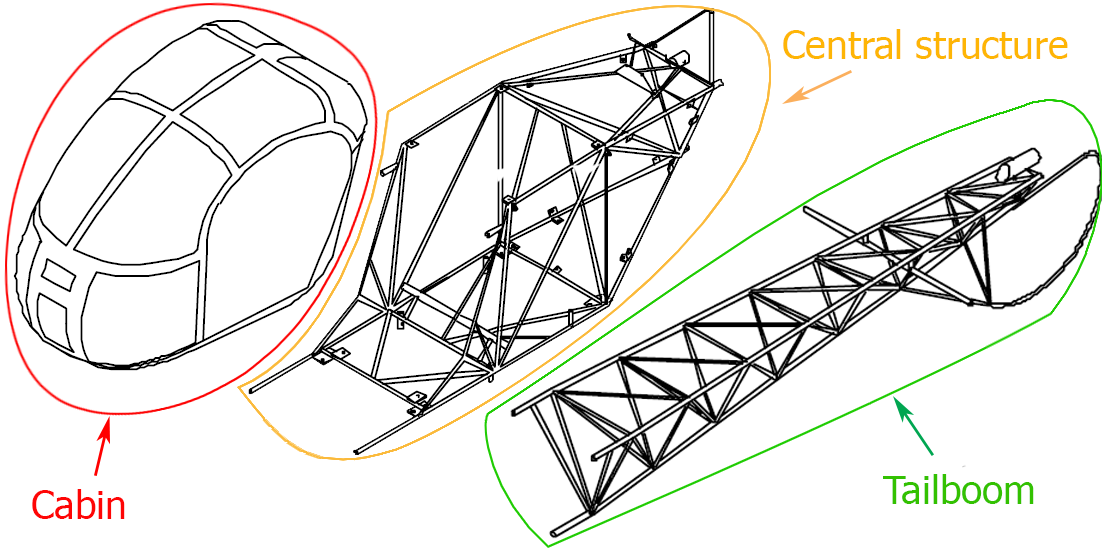
<style>
.page{position:relative;width:1102px;height:551px;background:#ffffff}
.page>*{position:absolute;margin:0}
.t1{font:38.9px "Tahoma";color:#feb505}
.t2{font:38.9px "Tahoma";color:#33c101}
.t3{font:38.9px "Tahoma";color:#fe0505}
</style>
<div class="page">
<p class="t1" style="left:783px;top:29px;width:285px;height:30px">Central structure</p>
<p class="t2" style="left:883px;top:474px;width:151px;height:30px">Tailboom</p>
<p class="t3" style="left:32px;top:489px;width:93px;height:30px">Cabin</p>
</div>
